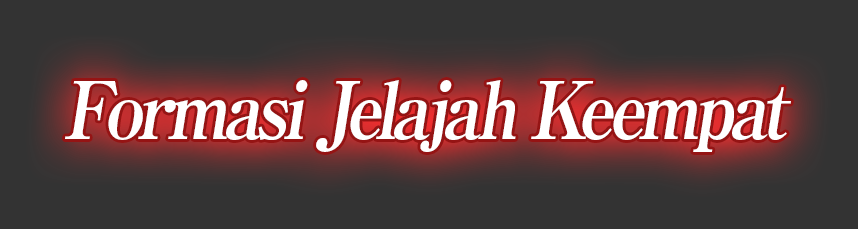
<style>
.page{position:relative;width:858px;height:229px;background:#333333}
.page>*{position:absolute;margin:0}
.t1{font:80px "RyuminPro-ExBold";letter-spacing:-0.08em;color:#ffffff;font-style:italic;scale:0.9 1}
</style>
<div class="page">
<p class="t1" style="left:65px;top:80px;width:726px;height:72px">Formasi Jelajah Keempat</p>
</div>
